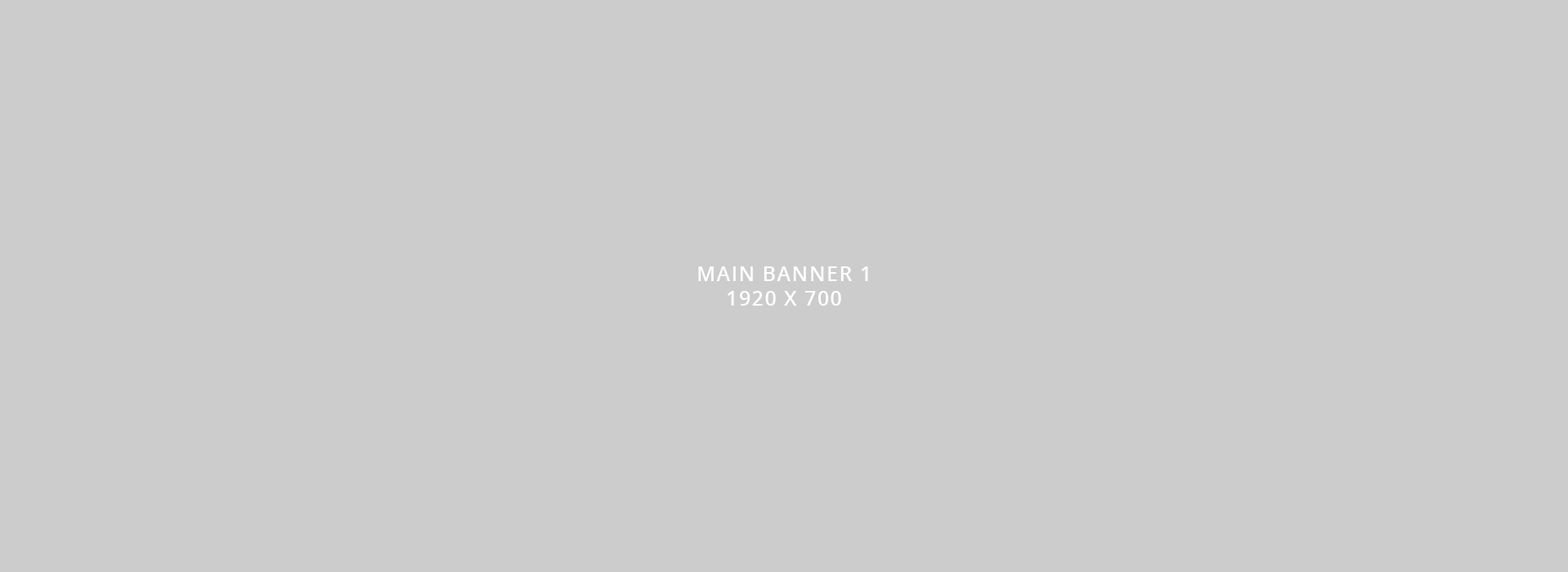
<style>
.page{position:relative;width:1568px;height:572px;background:#cccccc}
.page>*{position:absolute;margin:0}
.t1{font:20.4px "OpenSans-Semibold";letter-spacing:0.06em;color:#ffffff;text-transform:uppercase}
</style>
<div class="page">
<p class="t1" style="left:698px;top:266px;width:170px;height:39px;text-align:center">Main banner 1<br>1920 X 700</p>
</div>
